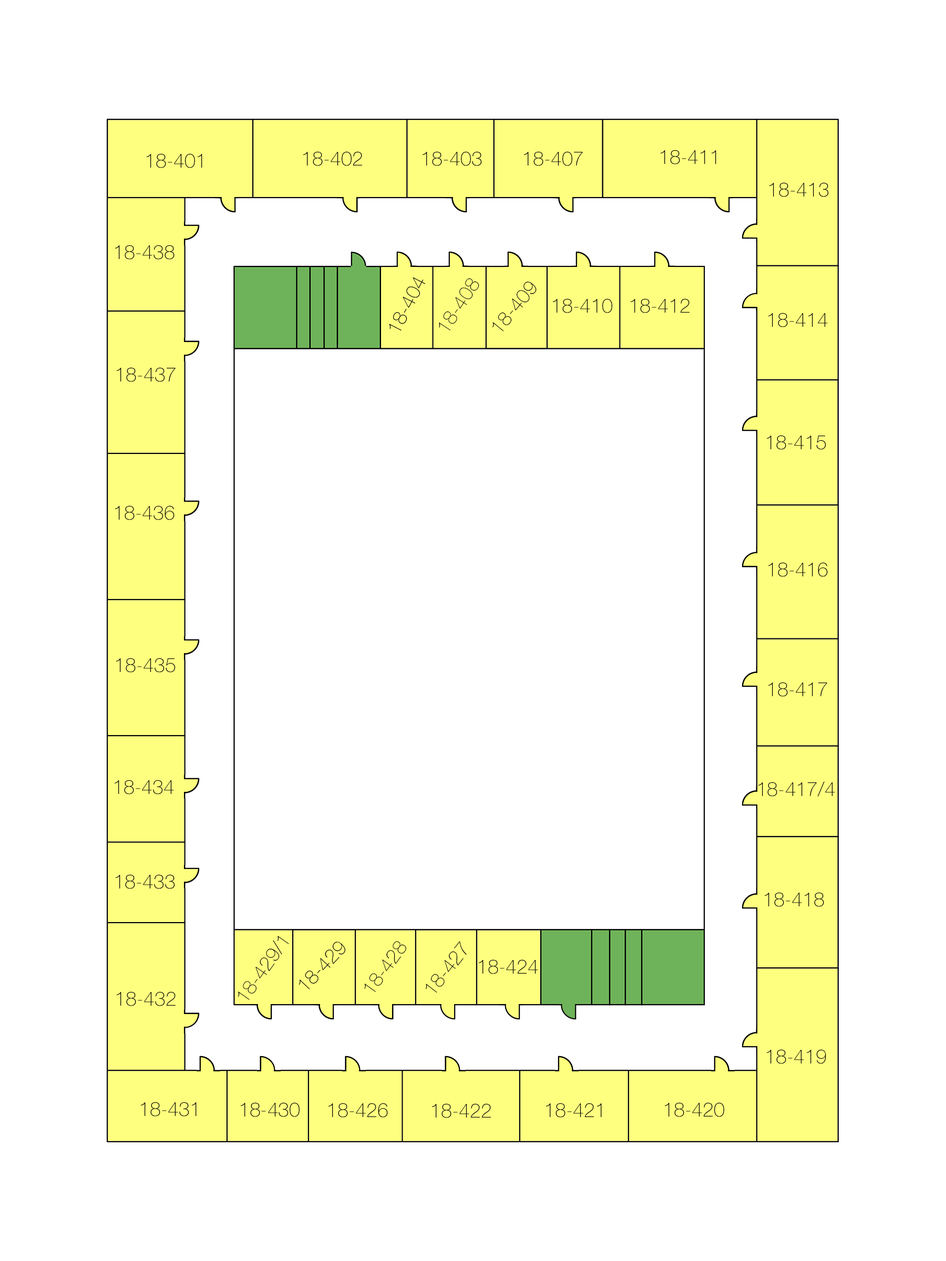
<style>
.page{position:relative;width:946px;height:1261px;background:#ffffff}
.page>*{position:absolute;margin:0}
.t1{font:19.7px "HelveticaNeue-Thin";color:#090909}
</style>
<div class="page">
<p class="t1" style="left:660px;top:150px;width:56px;height:14px">18-411</p>
<p class="t1" style="left:147px;top:153px;width:55px;height:15px">18-401</p>
<p class="t1" style="left:303px;top:151px;width:59px;height:15px">18-402</p>
<p class="t1" style="left:422px;top:151px;width:60px;height:15px">18-403</p>
<p class="t1" style="left:524px;top:151px;width:59px;height:15px">18-407</p>
<p class="t1" style="left:769px;top:182px;width:60px;height:15px">18-413</p>
<p class="t1" style="left:115px;top:245px;width:59px;height:15px">18-438</p>
<p class="t1" style="left:389px;top:277px;width:37px;height:54px;rotate:-63deg">18-404</p>
<p class="t1" style="left:439px;top:278px;width:40px;height:52px;rotate:-57deg">18-408</p>
<p class="t1" style="left:492px;top:282px;width:44px;height:50px;rotate:-51deg">18-409</p>
<p class="t1" style="left:553px;top:298px;width:59px;height:15px">18-410</p>
<p class="t1" style="left:630px;top:298px;width:59px;height:15px">18-412</p>
<p class="t1" style="left:768px;top:313px;width:59px;height:14px">18-414</p>
<p class="t1" style="left:117px;top:367px;width:58px;height:15px">18-437</p>
<p class="t1" style="left:767px;top:435px;width:59px;height:15px">18-415</p>
<p class="t1" style="left:115px;top:505px;width:59px;height:15px">18-436</p>
<p class="t1" style="left:768px;top:562px;width:59px;height:15px">18-416</p>
<p class="t1" style="left:116px;top:658px;width:59px;height:14px">18-435</p>
<p class="t1" style="left:768px;top:682px;width:59px;height:15px">18-417</p>
<p class="t1" style="left:115px;top:780px;width:59px;height:14px">18-434</p>
<p class="t1" style="left:758px;top:781px;width:77px;height:15px">18-417/4</p>
<p class="t1" style="left:116px;top:874px;width:59px;height:15px">18-433</p>
<p class="t1" style="left:764px;top:892px;width:60px;height:15px">18-418</p>
<p class="t1" style="left:237px;top:936px;width:52px;height:64px;rotate:-55deg">18-429/1</p>
<p class="t1" style="left:298px;top:941px;width:47px;height:48px;rotate:-47deg">18-429</p>
<p class="t1" style="left:364px;top:941px;width:42px;height:51px;rotate:-54deg">18-428</p>
<p class="t1" style="left:425px;top:941px;width:42px;height:52px;rotate:-52deg">18-427</p>
<p class="t1" style="left:479px;top:959px;width:59px;height:15px">18-424</p>
<p class="t1" style="left:117px;top:991px;width:58px;height:15px">18-432</p>
<p class="t1" style="left:767px;top:1049px;width:59px;height:15px">18-419</p>
<p class="t1" style="left:141px;top:1102px;width:55px;height:14px">18-431</p>
<p class="t1" style="left:241px;top:1102px;width:58px;height:15px">18-430</p>
<p class="t1" style="left:328px;top:1103px;width:60px;height:14px">18-426</p>
<p class="t1" style="left:432px;top:1103px;width:59px;height:15px">18-422</p>
<p class="t1" style="left:546px;top:1103px;width:56px;height:14px">18-421</p>
<p class="t1" style="left:665px;top:1102px;width:59px;height:15px">18-420</p>
</div>
